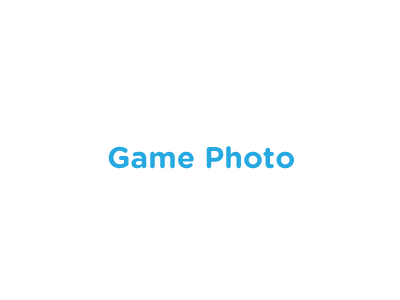
<style>
.page{position:relative;width:400px;height:300px;background:#ffffff}
.page>*{position:absolute;margin:0}
.t1{font:30px "GothamRounded-Bold";color:#26a9e1}
</style>
<div class="page">
<p class="t1" style="left:108px;top:146px;width:186px;height:23px">Game Photo</p>
</div>
